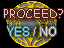
<style>
.page{position:relative;width:64px;height:48px;background:#000000}
.page>*{position:absolute;margin:0}
.t1{font:12px "ComicSansMS";color:#e0c8d0}
.t2{font:12px "ArialMT";color:#6ddce5}
.t3{font:12px "ArialMT";color:#bfbfbd}
.t4{font:12px "ArialMT";color:#e0e0e0}
</style>
<div class="page">
<p class="t1" style="left:4px;top:9px;width:59px;height:9px">PROCEED?</p>
<p class="t2" style="left:7px;top:27px;width:22px;height:9px">YES</p>
<p class="t3" style="left:33px;top:27px;width:3px;height:9px">/</p>
<p class="t4" style="left:40px;top:27px;width:16px;height:9px">NO</p>
</div>
